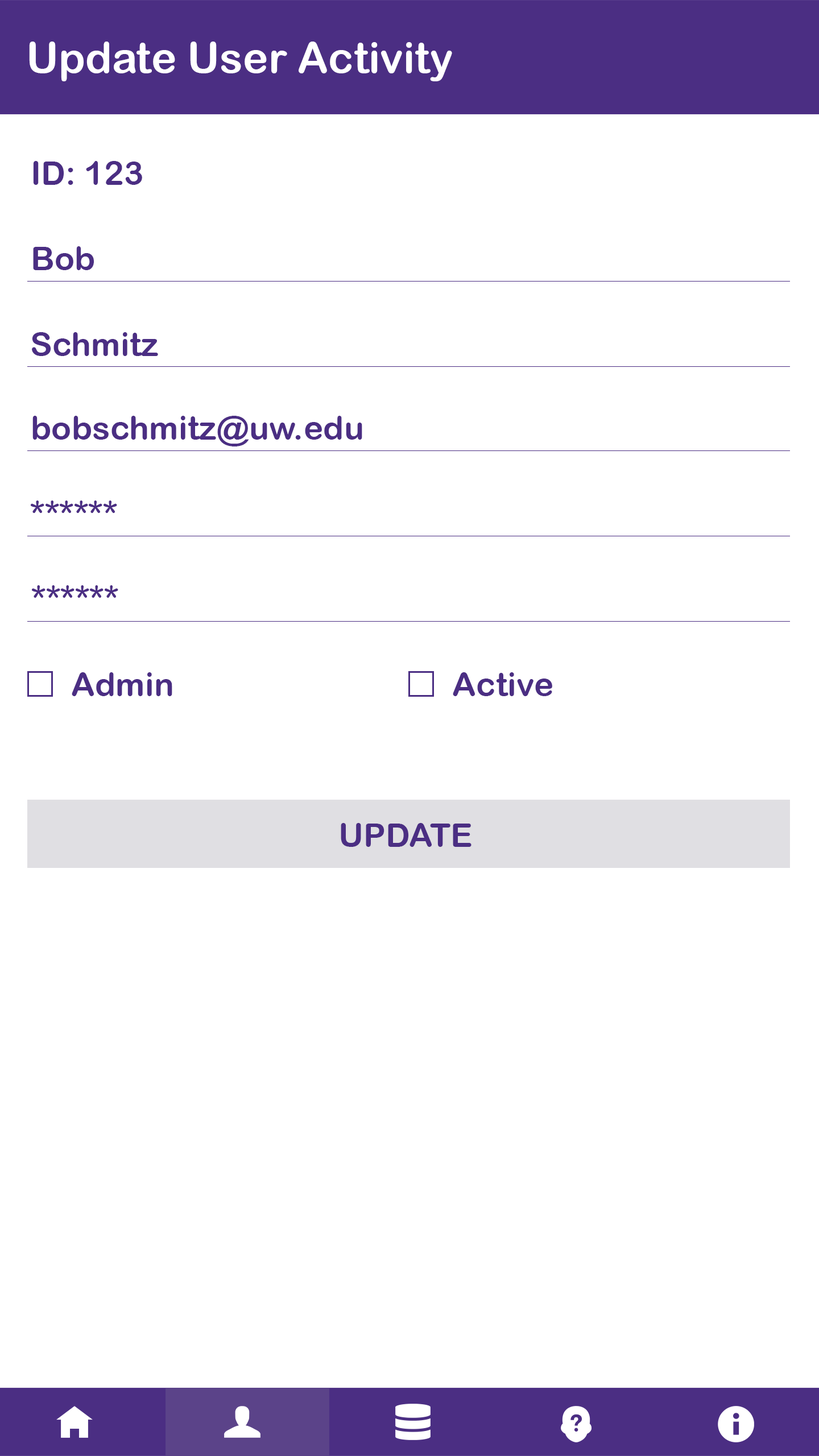
<style>
.page{position:relative;width:819px;height:1456px;background:#ffffff}
.page>*{position:absolute;margin:0}
.t1{font:42.7px "ArialRoundedMTBold";color:#ffffff}
.t2{font:33.2px "ArialRoundedMTBold";color:#4b2e83}
</style>
<div class="page">
<p class="t1" style="left:29px;top:42px;width:423px;height:39px">Update User Activity</p>
<p class="t2" style="left:33px;top:161px;width:109px;height:24px">ID: 123</p>
<p class="t2" style="left:33px;top:246px;width:61px;height:24px">Bob</p>
<p class="t2" style="left:32px;top:332px;width:126px;height:24px">Schmitz</p>
<p class="t2" style="left:32px;top:416px;width:330px;height:30px">bobschmitz@uw.edu</p>
<p class="t2" style="left:30px;top:500px;width:87px;height:13px">******</p>
<p class="t2" style="left:31px;top:585px;width:87px;height:13px">******</p>
<p class="t2" style="left:72px;top:672px;width:100px;height:24px">Admin</p>
<p class="t2" style="left:453px;top:672px;width:99px;height:24px">Active</p>
<p class="t2" style="left:341px;top:823px;width:130px;height:24px">UPDATE</p>
</div>
